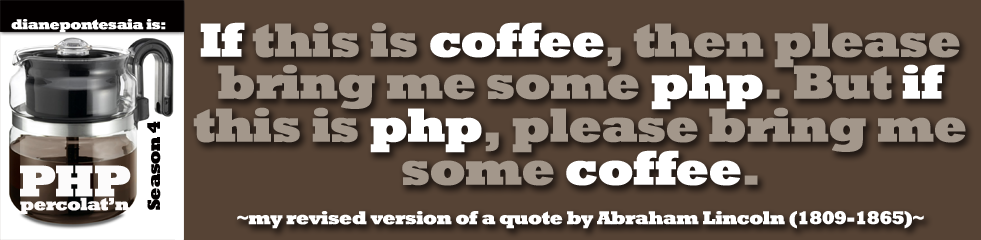
<style>
.page{position:relative;width:981px;height:240px;background:#564335}
.page>*{position:absolute;margin:0}
.t1{font:14.4px "Rockwell-ExtraBold";letter-spacing:-0.05em;color:#ffffff;font-weight:bold}
.t2{font:18.7px/40px "Rockwell-ExtraBold";letter-spacing:-0.05em;color:#ffffff;font-weight:bold}
.t3{font:48px/42.7px "Rockwell-ExtraBold";letter-spacing:-0.05em;color:#ffffff;font-weight:bold}
.t4{font:48px/42.7px "Rockwell-ExtraBold";letter-spacing:-0.05em;color:#a3978b;font-weight:bold}
.t5{font:18px "Rockwell-ExtraBold";letter-spacing:-0.05em;color:#030000;font-weight:bold}
.t6{font:18px/13.8px "Rockwell-ExtraBold";letter-spacing:-0.05em;color:#fdfafa;font-weight:bold}
.t7{font:60px/45px "Rockwell-ExtraBold";letter-spacing:-0.05em;color:#030000;font-weight:bold}
.t8{font:45px/21.6px "Rockwell-ExtraBold";letter-spacing:-0.05em;color:#fcfbfb;font-weight:bold}
</style>
<div class="page">
<p class="t1" style="left:11px;top:19px;width:155px;height:14px">dianepontesaia is:</p>
<p class="t2" style="left:193px;top:22px;width:773px;height:207px;text-align:center"><span class="t3">If</span><span class="t4"> this is </span><span class="t3">coffee</span><span class="t4">, then please bring me some </span><span class="t3">php</span><span class="t4">. But </span><span class="t3">if</span><span class="t4"> this is </span><span class="t3">php</span><span class="t4">, please bring me some </span><span class="t3">coffee</span><span class="t4">.    <br></span>~my revised version of a quote by Abraham Lincoln (1809-1865)~</p>
<p class="t5" style="left:147px;top:121px;width:14px;height:89px;rotate:-90deg">Season 4</p>
<p class="t6" style="left:20px;top:165px;width:111px;height:49px;text-align:center"><span class="t7"><br><br></span><span class="t8">PHP<br></span>percolat’n</p>
</div>
